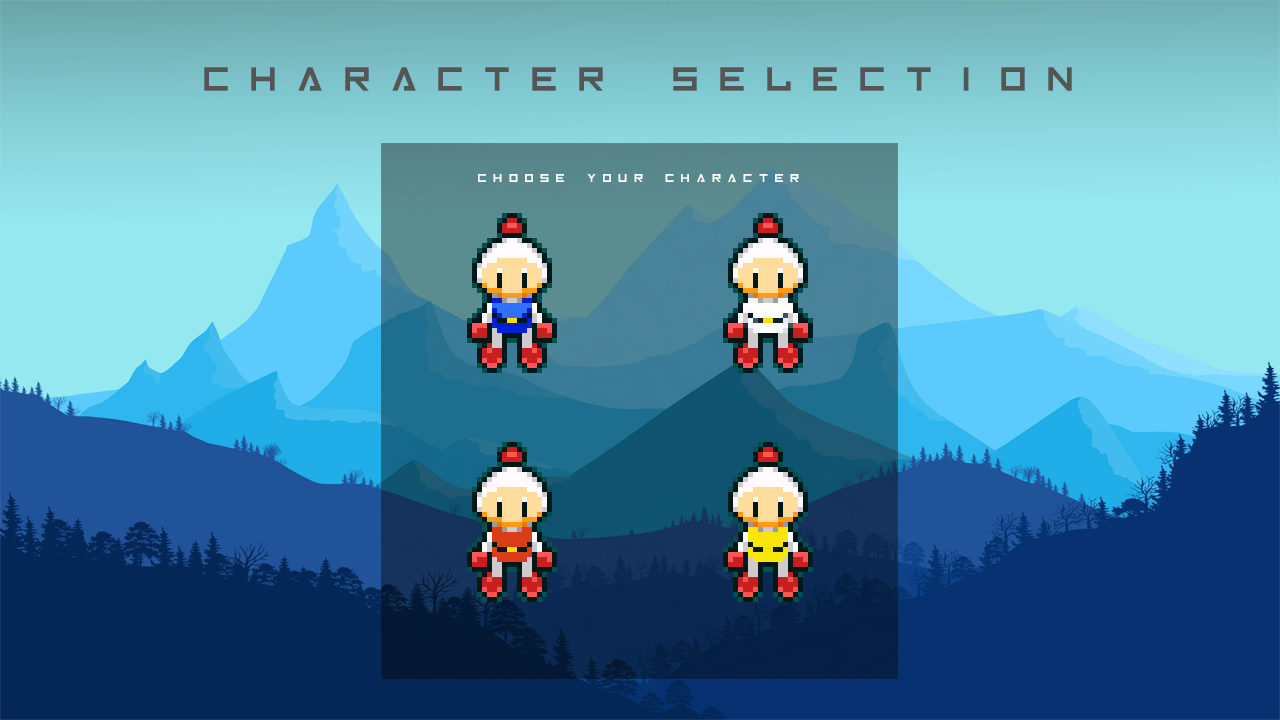
<style>
.page{position:relative;width:1280px;height:720px}
.page>*{position:absolute;margin:0}
.t1{font:75px "Inversionz";color:#555555}
.t2{font:25px "Inversionz";color:#ffffff}
</style>
<div class="page">
<p class="t1" style="left:204px;top:67px;width:868px;height:24px">CHARACTER SELECTION</p>
<p class="t2" style="left:478px;top:174px;width:321px;height:8px">CHOOSE YOUR CHARACTER</p>
</div>
